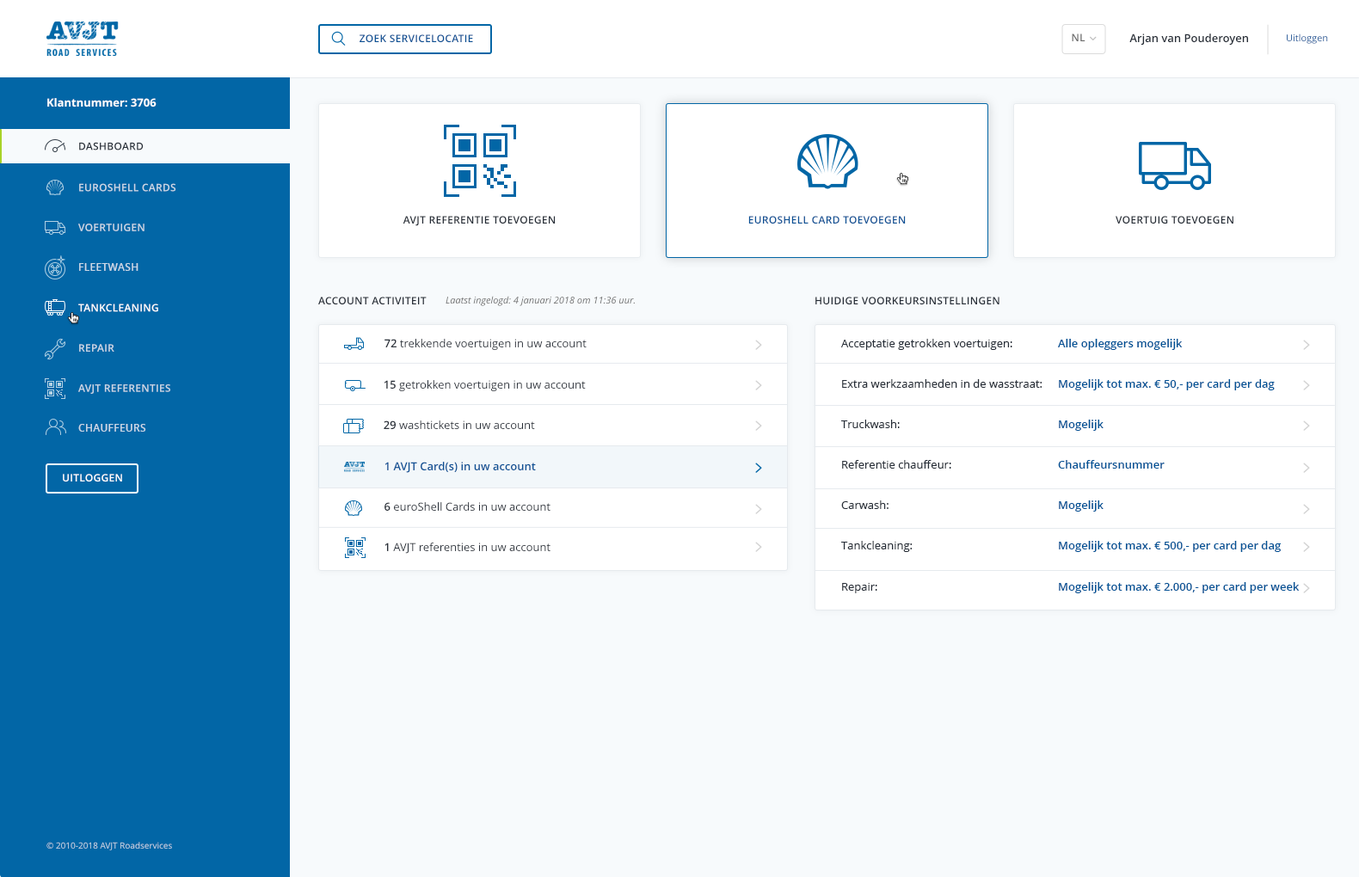
<style>
.page{position:relative;width:1359px;height:877px;background:#f7fafc}
.page>*{position:absolute;margin:0}
.t1{font:10.3px "OpenSans-Semibold";letter-spacing:0.023em;color:#0b5195;text-transform:uppercase}
.t2{font:10.3px "OpenSans-Semibold";letter-spacing:0.023em;color:#6d6d6d;text-transform:uppercase}
.t3{font:11.2px "OpenSans-Semibold";color:#262d37}
.t4{font:9.5px "OpenSans"}
.t5{font:11.2px "OpenSans-Bold";color:#ffffff}
.t6{font:10.3px "OpenSans-Semibold";letter-spacing:0.023em;color:#262d37;text-transform:uppercase}
.t7{font:10.3px "OpenSans-Semibold";letter-spacing:0.023em;color:#cbd8e6;text-transform:uppercase}
.t8{font:10.3px "OpenSans-Semibold";letter-spacing:0.023em;color:#cbd9e7;text-transform:uppercase}
.t9{font:10.3px "OpenSans-Semibold";letter-spacing:0.023em;color:#ffffff;text-transform:uppercase}
.t10{font:9.5px "OpenSans-Italic";color:#6d6d6d}
.t11{font:11.2px "OpenSans";color:#262d37}
.t12{font:11.2px "OpenSans-Semibold";color:#005396}
.t13{font:11.2px "OpenSans";color:#282f38}
.t14{font:11.2px "OpenSans-Semibold";color:#282f38}
.t15{font:11.2px "OpenSans-Semibold";color:#0b5195}
.t16{font:8.6px "OpenSans"}
</style>
<div class="page">
<p class="t1" style="left:360px;top:34px;width:113px;height:9px">zoek servicelocatie</p>
<p class="t2" style="left:1072px;top:34px;width:14px;height:7px">NL</p>
<p class="t3" style="left:1129px;top:34px;width:119px;height:12px">Arjan van Pouderoyen</p>
<p class="t4" style="left:1286px;top:34px;width:42px;height:10px">Uitloggen</p>
<p class="t5" style="left:47px;top:98px;width:110px;height:10px">Klantnummer: 3706</p>
<p class="t6" style="left:79px;top:142px;width:65px;height:9px">dashboard</p>
<p class="t7" style="left:79px;top:183px;width:97px;height:9px">EuroShell Cards</p>
<p class="t6" style="left:403px;top:216px;width:153px;height:10px">AVJT referentie toevoegen</p>
<p class="t1" style="left:748px;top:216px;width:158px;height:9px">EuroShell Card Toevoegen</p>
<p class="t6" style="left:1115px;top:216px;width:118px;height:9px">Voertuig Toevoegen</p>
<p class="t8" style="left:78px;top:224px;width:67px;height:7px">voertuigen</p>
<p class="t8" style="left:79px;top:263px;width:59px;height:8px">fleetwash</p>
<p class="t9" style="left:78px;top:304px;width:80px;height:8px">tankcleaning</p>
<p class="t6" style="left:318px;top:297px;width:109px;height:8px">Account Activiteit</p>
<p class="t10" style="left:446px;top:296px;width:189px;height:10px">Laatst ingelogd: 4 januari 2018 om 11:36 uur.</p>
<p class="t6" style="left:815px;top:297px;width:185px;height:8px">Huidige Voorkeursinstellingen</p>
<p class="t11" style="left:384px;top:339px;width:203px;height:12px"><span class="t3">72</span> trekkende voertuigen in uw account</p>
<p class="t11" style="left:841px;top:339px;width:342px;height:11px">Acceptatie getrokken voertuigen:  <span class="t12">Alle opleggers mogelijk</span></p>
<p class="t7" style="left:79px;top:344px;width:35px;height:8px">repair</p>
<p class="t8" style="left:78px;top:384px;width:92px;height:11px">avjt referenties</p>
<p class="t13" style="left:384px;top:380px;width:202px;height:12px"><span class="t14">15 </span>getrokken voertuigen in uw account</p>
<p class="t12" style="left:842px;top:379px;width:433px;height:12px"><span class="t11">Extra werkzaamheden in de wasstraat: </span>Mogelijk tot max. € 50,- per card per dag</p>
<p class="t8" style="left:78px;top:424px;width:68px;height:8px">chauffeurs</p>
<p class="t11" style="left:384px;top:421px;width:151px;height:9px"><span class="t3">29</span> washtickets in uw account</p>
<p class="t11" style="left:841px;top:420px;width:263px;height:11px">Truckwash: <span class="t12">     Mogelijk</span></p>
<p class="t15" style="left:384px;top:462px;width:152px;height:11px">1 AVJT Card(s) in uw account</p>
<p class="t11" style="left:842px;top:460px;width:323px;height:9px">Referentie chauffeur:    <span class="t12">Chauffeursnummer</span></p>
<p class="t9" style="left:63px;top:474px;width:59px;height:9px">uitloggen</p>
<p class="t11" style="left:384px;top:502px;width:167px;height:10px"><span class="t3">6</span> euroShell Cards in uw account</p>
<p class="t11" style="left:841px;top:501px;width:263px;height:11px">Carwash:      <span class="t12">Mogelijk</span></p>
<p class="t11" style="left:384px;top:543px;width:167px;height:11px"><span class="t3">1</span> AVJT referenties in uw account</p>
<p class="t12" style="left:841px;top:541px;width:441px;height:11px"><span class="t11">Tankcleaning:  </span>   Mogelijk tot max. € 500,- per card per dag</p>
<p class="t12" style="left:842px;top:582px;width:458px;height:12px"><span class="t11">Repair:      </span>Mogelijk tot max. € 2.000,- per card per week</p>
<p class="t16" style="left:46px;top:842px;width:126px;height:9px">© 2010-2018 AVJT Roadservices</p>
</div>
